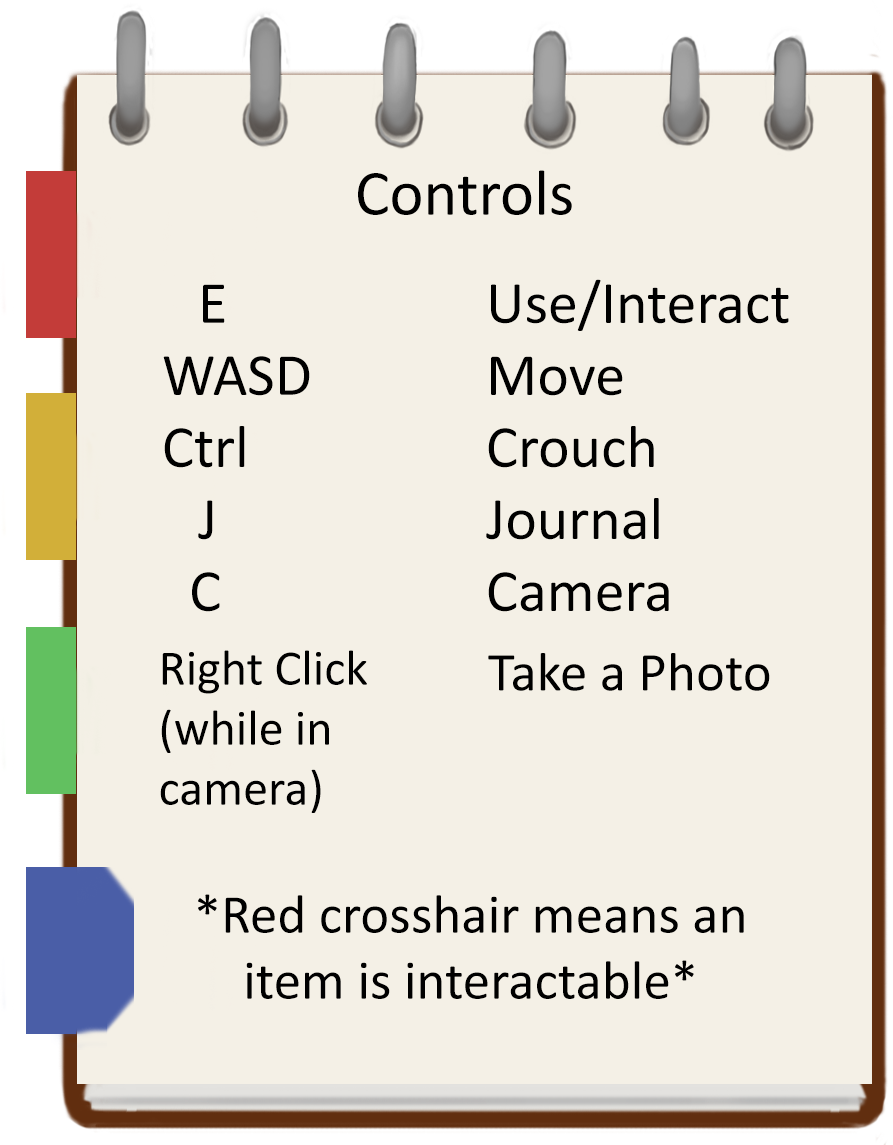
<style>
.page{position:relative;width:893px;height:1145px;background:#f4f0e6}
.page>*{position:absolute;margin:0}
.t1{font:64.7px "Calibri";color:#000000}
.t2{font:60px "Calibri";color:#000000}
.t3{font:50px "Calibri";color:#000000}
.t4{font:55px "Calibri";color:#000000}
</style>
<div class="page">
<p class="t1" style="left:358px;top:170px;width:214px;height:45px">Controls</p>
<p class="t2" style="left:163px;top:279px;width:626px;height:333px">E        Use/Interact<br>WASD       Move<br>Ctrl       Crouch<br> J          Journal<br>  C        Camera</p>
<p class="t3" style="left:160px;top:650px;width:207px;height:163px">Right Click (while in <br>camera)</p>
<p class="t4" style="left:488px;top:653px;width:282px;height:38px">Take a Photo</p>
<p class="t4" style="left:198px;top:894px;width:546px;height:105px;text-align:center">*Red crosshair means an item is interactable*</p>
</div>
